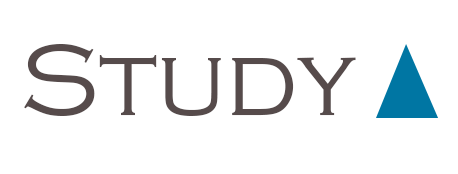
<style>
.page{position:relative;width:458px;height:174px;background:#ffffff}
.page>*{position:absolute;margin:0}
.t1{font:105px "CopperplateGothic-Light";color:#564b4b}
</style>
<div class="page">
<p class="t1" style="left:24px;top:44px;width:332px;height:72px">Study</p>
</div>
